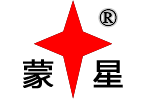
<style>
.page{position:relative;width:150px;height:100px;background:#ffffff}
.page>*{position:absolute;margin:0}
.t1{font:30px "MicrosoftYaHei";color:#000000;font-weight:bold}
</style>
<div class="page">
<p class="t1" style="left:23px;top:59px;width:100px;height:30px">蒙    星</p>
</div>
